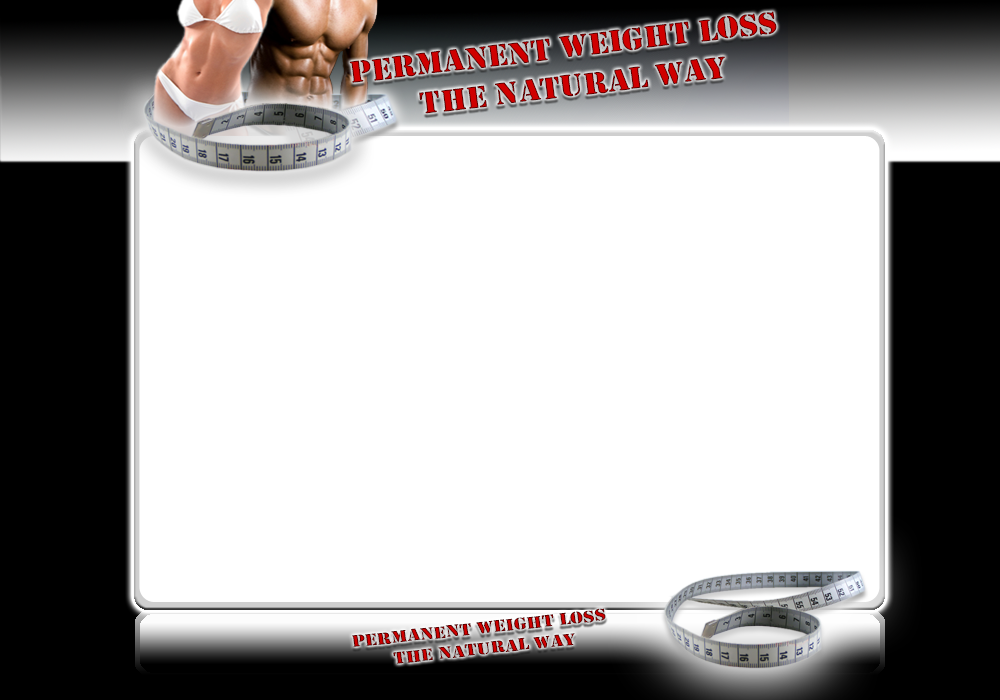
<style>
.page{position:relative;width:1000px;height:700px;background:#ffffff}
.page>*{position:absolute;margin:0}
.t1{font:32.3px "Stencil";scale:1.07 1}
.t2{font:17.3px "Stencil";scale:1.19 1}
</style>
<div class="page">
<p class="t1" style="left:349px;top:11px;width:428px;height:103px;text-align:center;rotate:-7deg">PERMANENT WEIGHT LOSS <br>THE NATURAL WAY</p>
<p class="t2" style="left:352px;top:608px;width:254px;height:56px;text-align:center;rotate:-6deg">PERMANENT WEIGHT LOSS <br>THE NATURAL WAY</p>
</div>
